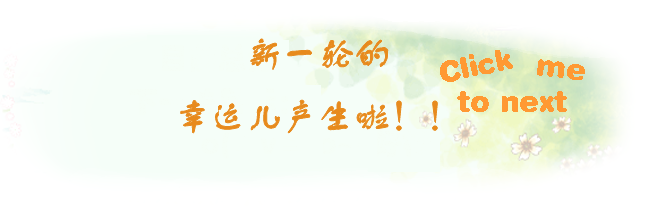
<style>
.page{position:relative;width:657px;height:215px;background:#ffffff}
.page>*{position:absolute;margin:0}
.t1{font:36px "FZSTK--GBK1-0";color:#e78a1d}
</style>
<div class="page">
<p class="t1" style="left:180px;top:39px;width:258px;height:94px;text-align:center">新一轮的<br>幸运儿产生啦！！</p>
</div>
